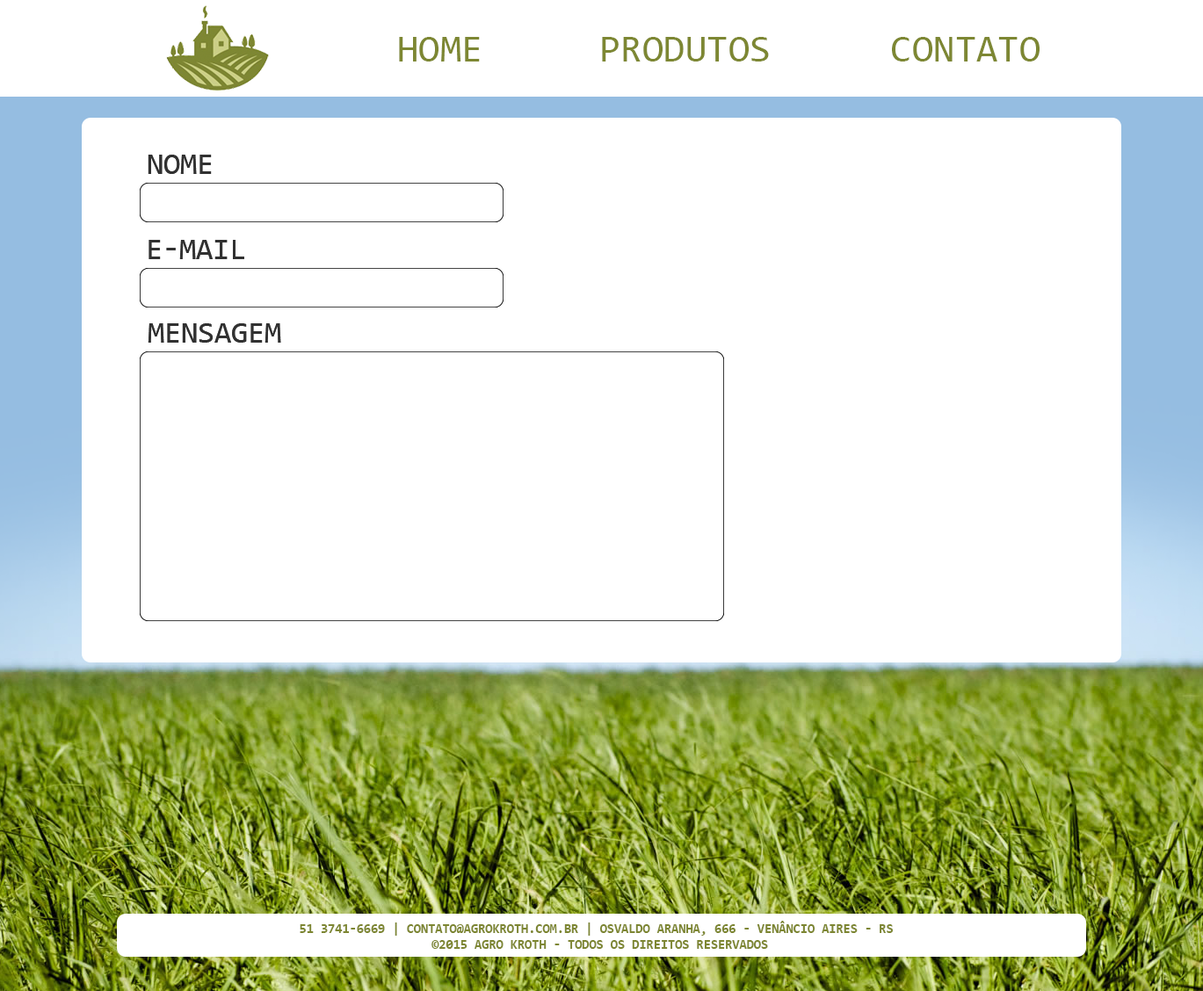
<style>
.page{position:relative;width:1203px;height:991px;background:#ffffff}
.page>*{position:absolute;margin:0}
.t1{font:39.1px "Consolas";color:#7d8733;text-transform:uppercase}
.t2{font:30.4px "Consolas";color:#313131;text-transform:uppercase}
.t3{font:13px "Consolas-Bold";color:#7d8632;text-transform:uppercase}
</style>
<div class="page">
<p class="t1" style="left:399px;top:37px;width:81px;height:25px">HOME</p>
<p class="t1" style="left:602px;top:37px;width:167px;height:25px">PRODUTOS</p>
<p class="t1" style="left:892px;top:37px;width:148px;height:25px">CONTATO</p>
<p class="t2" style="left:148px;top:155px;width:64px;height:19px">Nome</p>
<p class="t2" style="left:148px;top:155px;width:64px;height:19px">Nome</p>
<p class="t2" style="left:149px;top:240px;width:95px;height:19px">E-MAIL</p>
<p class="t2" style="left:149px;top:240px;width:95px;height:19px">E-MAIL</p>
<p class="t2" style="left:148px;top:323px;width:133px;height:20px">Mensagem</p>
<p class="t2" style="left:148px;top:323px;width:133px;height:20px">Mensagem</p>
<p class="t3" style="left:300px;top:921px;width:593px;height:28px;text-align:center">51 3741-6669 | contato@AGROKROTH.com.br | Osvaldo aranha, 666 - Venâncio Aires - RS <br>©2015 AGRO KROTH - Todos os direitos reservados</p>
</div>
